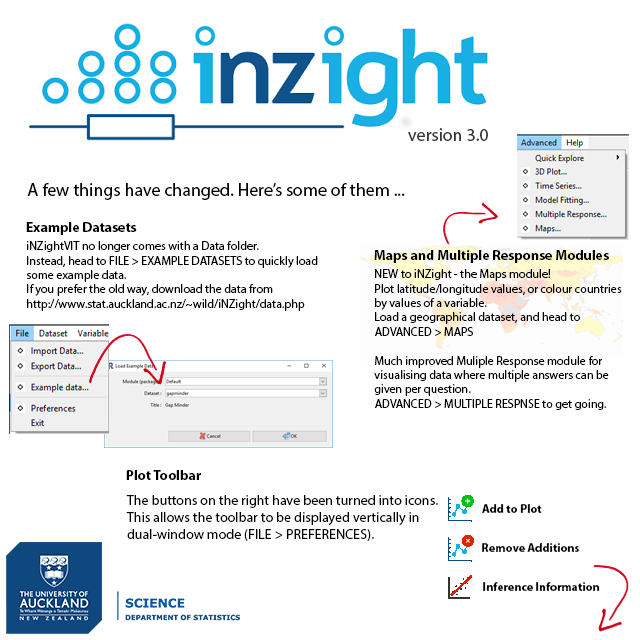
<style>
.page{position:relative;width:640px;height:640px;background:#ffffff}
.page>*{position:absolute;margin:0}
.t1{font:18px "MyriadPro-Regular";color:#363636}
.t2{font:18px "MyriadPro-Regular";color:#010000}
.t3{font:14px "MyriadPro-Bold";color:#000000}
.t4{font:12px "MyriadPro-Regular";color:#000000}
.t5{font:14px "MyriadPro-Regular";color:#000000}
.t6{font:12px "MyriadPro-Bold";color:#000000}
</style>
<div class="page">
<p class="t1" style="left:408px;top:128px;width:80px;height:13px">version 3.0</p>
<p class="t2" style="left:27px;top:183px;width:378px;height:17px">A few things have changed. Here’s some of them ...</p>
<p class="t3" style="left:26px;top:222px;width:111px;height:13px">Example Datasets</p>
<p class="t4" style="left:26px;top:241px;width:292px;height:70px">iNZightVIT no longer comes with a Data folder.<br>Instead, head to FILE &gt; EXAMPLE DATASETS to quickly load some example data.<br>If you prefer the old way, download the data from<br>http://www.stat.auckland.ac.nz/~wild/iNZight/data.php</p>
<p class="t3" style="left:374px;top:250px;width:235px;height:13px">Maps and Multiple Response Modules</p>
<p class="t4" style="left:374px;top:269px;width:248px;height:141px">NEW to iNZight - the Maps module!<br>Plot latitude/longitude values, or colour countries by values of a variable.<br>Load a geographical dataset, and head to <br>ADVANCED &gt; MAPS<br><br>Much improved Muliple Response module for visualising data where multiple answers can be given per question.<br>ADVANCED &gt; MULTIPLE RESPNSE to get going.</p>
<p class="t3" style="left:126px;top:470px;width:75px;height:10px">Plot Toolbar</p>
<p class="t5" style="left:126px;top:495px;width:312px;height:46px">The buttons on the right have been turned into icons.<br>This allows the toolbar to be displayed vertically in dual-window mode (FILE &gt; PREFERENCES).</p>
<p class="t6" style="left:482px;top:504px;width:60px;height:9px">Add to Plot</p>
<p class="t6" style="left:482px;top:543px;width:97px;height:9px">Remove Additions</p>
<p class="t6" style="left:483px;top:582px;width:117px;height:9px">Inference Information</p>
</div>
